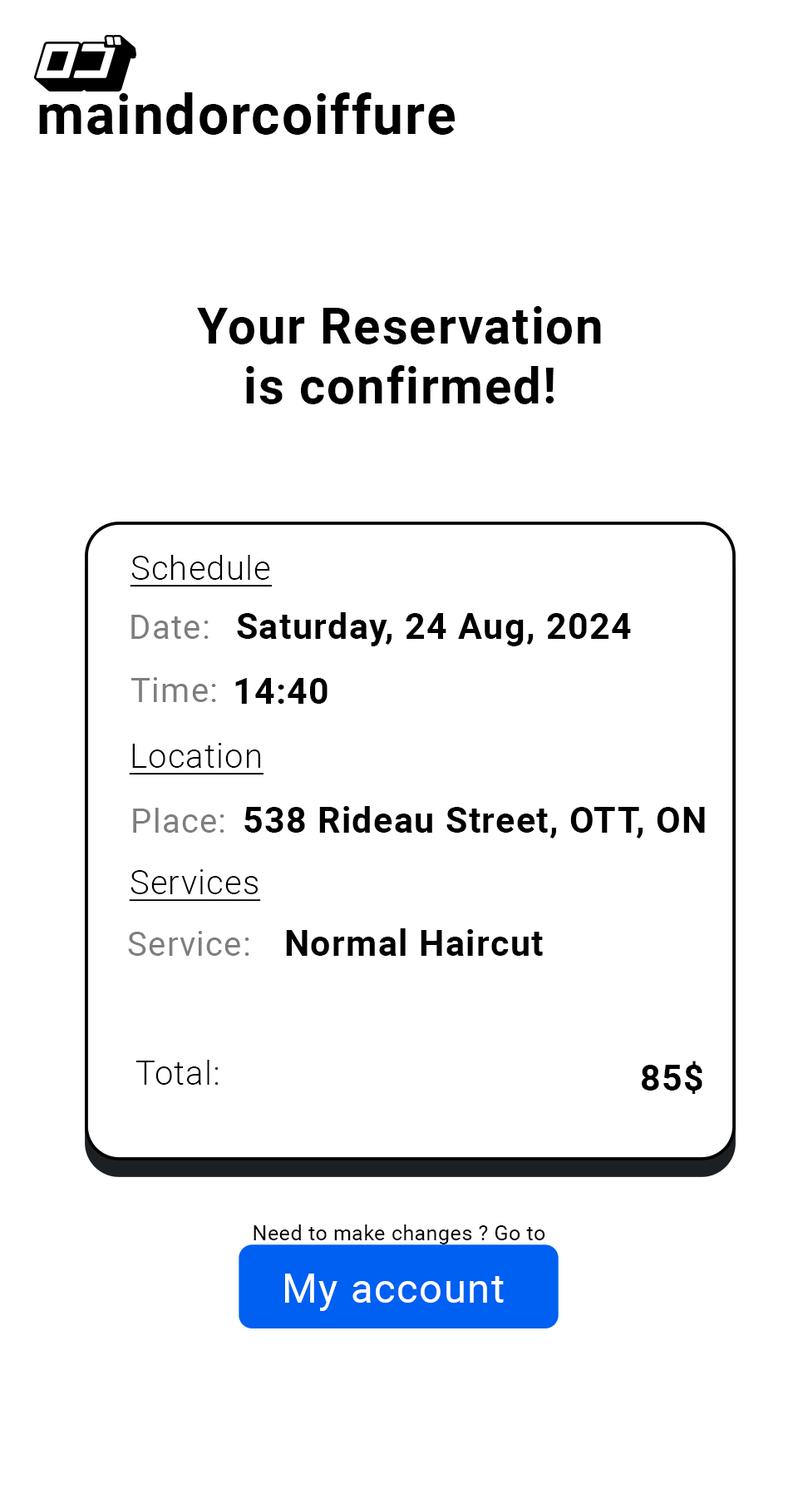
<style>
.page{position:relative;width:798px;height:1494px;background:#ffffff}
.page>*{position:absolute;margin:0}
.t1{font:54.8px "Roboto-Bold";letter-spacing:0.03em;color:#000000}
.t2{font:49.9px "Roboto-Bold";letter-spacing:0.03em;color:#000000}
.t3{font:33.3px "Roboto-Light";letter-spacing:0.03em;color:#000000;text-decoration:underline}
.t4{font:33.3px "Roboto-Regular";letter-spacing:0.03em;color:#7e7e7e}
.t5{font:35.9px "Roboto-Bold";letter-spacing:0.03em;color:#000000}
.t6{font:33.3px "Roboto-Light";letter-spacing:0.03em;color:#000000}
.t7{font:20.4px "Roboto-Regular";letter-spacing:0.03em;color:#000000}
.t8{font:40.9px "Roboto-Regular";letter-spacing:0.03em;color:#ffffff}
</style>
<div class="page">
<p class="t1" style="left:39px;top:92px;width:416px;height:43px">maindorcoiffure</p>
<p class="t2" style="left:197px;top:306px;width:404px;height:98px;text-align:center">Your Reservation<br>is confirmed!</p>
<p class="t3" style="left:130px;top:555px;width:143px;height:32px">Schedule</p>
<p class="t4" style="left:131px;top:615px;width:78px;height:24px">Date:</p>
<p class="t5" style="left:237px;top:612px;width:394px;height:34px">Saturday, 24 Aug, 2024</p>
<p class="t4" style="left:131px;top:677px;width:85px;height:25px">Time:</p>
<p class="t5" style="left:235px;top:678px;width:93px;height:26px">14:40</p>
<p class="t3" style="left:129px;top:743px;width:135px;height:32px">Location</p>
<p class="t4" style="left:133px;top:808px;width:92px;height:24px">Place:</p>
<p class="t5" style="left:244px;top:806px;width:461px;height:32px">538 Rideau Street, OTT, ON</p>
<p class="t3" style="left:129px;top:869px;width:132px;height:32px">Services</p>
<p class="t5" style="left:286px;top:928px;width:257px;height:28px">Normal Haircut</p>
<p class="t4" style="left:128px;top:931px;width:121px;height:25px">Service:</p>
<p class="t6" style="left:136px;top:1059px;width:83px;height:25px">Total:</p>
<p class="t5" style="left:642px;top:1060px;width:61px;height:34px">85$</p>
<p class="t7" style="left:254px;top:1224px;width:292px;height:20px">Need to make changes ? Go to</p>
<p class="t8" style="left:285px;top:1273px;width:219px;height:38px">My account</p>
</div>
